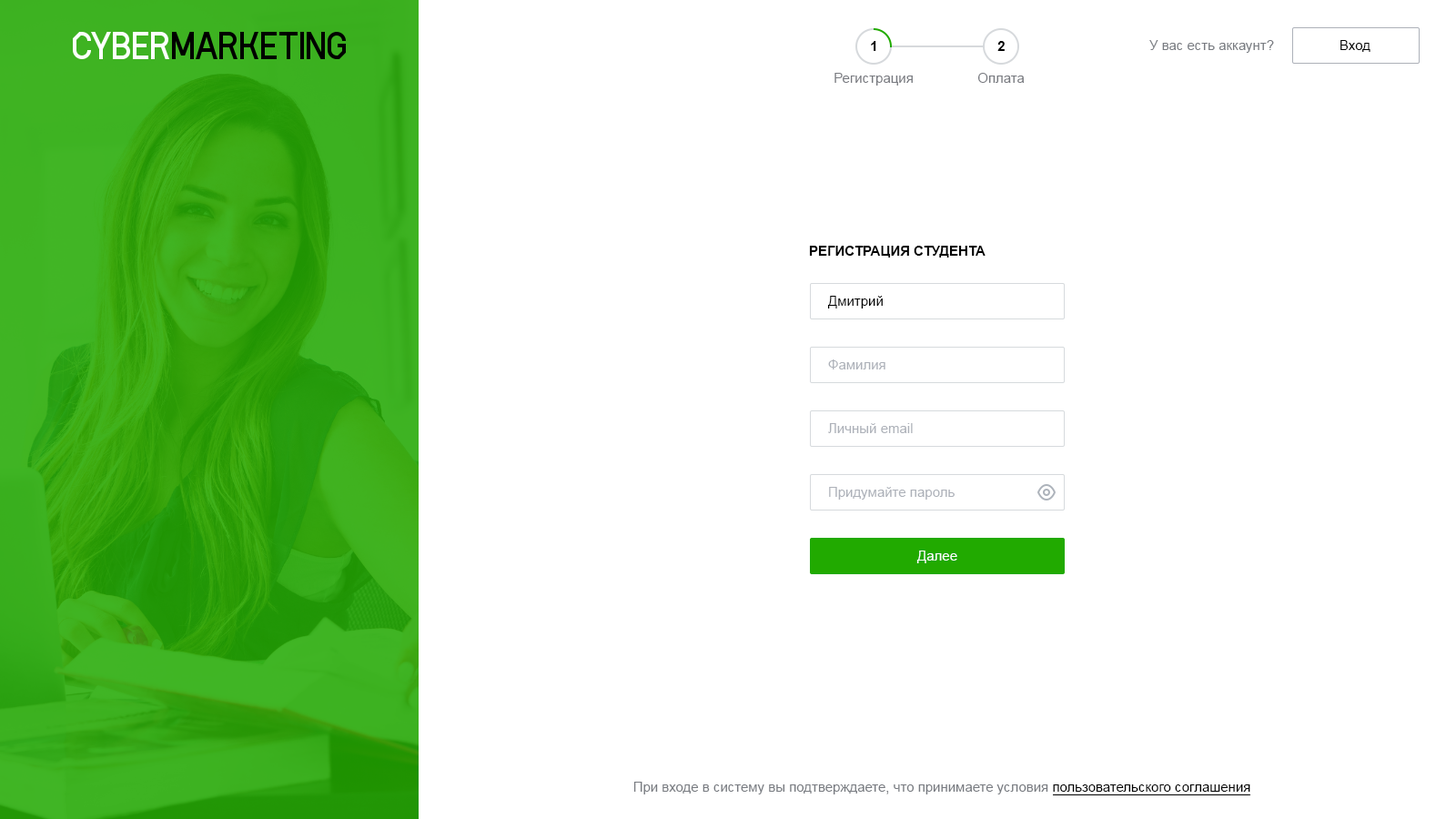
<style>
.page{position:relative;width:1456px;height:819px;background:#ffffff}
.page>*{position:absolute;margin:0}
.t1{font:13.6px "Arial-BoldMT";color:#000000;text-transform:uppercase}
.t2{font:13.6px "ArialMT";color:#787b81}
.t3{font:13.6px "ArialMT";color:#000000}
.t4{font:13.6px "ArialMT";color:#787a80}
.t5{font:13.6px "ArialMT";color:#adb1b9}
.t6{font:13.6px "ArialMT";color:#ffffff}
</style>
<div class="page">
<p class="t1" style="left:871px;top:41px;width:5px;height:10px">1</p>
<p class="t1" style="left:997px;top:41px;width:8px;height:10px">2</p>
<p class="t2" style="left:1149px;top:40px;width:125px;height:13px">У вас есть аккаунт?</p>
<p class="t3" style="left:1340px;top:40px;width:30px;height:12px">Вход</p>
<p class="t4" style="left:834px;top:73px;width:79px;height:13px">Регистрация</p>
<p class="t4" style="left:977px;top:73px;width:48px;height:10px">Оплата</p>
<p class="t1" style="left:809px;top:246px;width:177px;height:12px">Регистрация студента</p>
<p class="t3" style="left:827px;top:296px;width:56px;height:12px">Дмитрий</p>
<p class="t5" style="left:828px;top:359px;width:57px;height:10px">Фамилия</p>
<p class="t5" style="left:828px;top:423px;width:85px;height:10px">Личный email</p>
<p class="t5" style="left:829px;top:487px;width:126px;height:13px">Придумайте пароль</p>
<p class="t6" style="left:916px;top:551px;width:41px;height:12px">Далее</p>
<p class="t2" style="left:633px;top:782px;width:617px;height:12px">При входе в систему вы подтверждаете, что принимаете условия <span class="t3">пользовательского соглашения</span></p>
</div>
